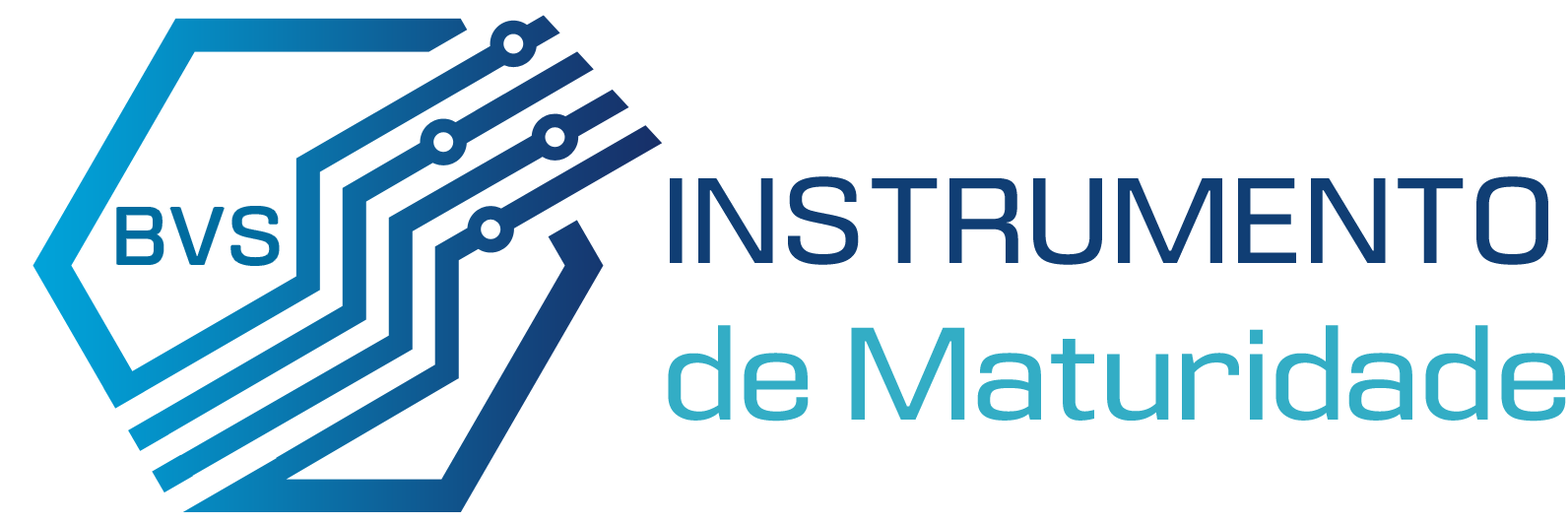
<style>
.page{position:relative;width:1568px;height:524px;background:#ffffff}
.page>*{position:absolute;margin:0}
.t1{font:130.9px "Eurocine-Regular";color:#33adc5;scale:0.9 1}
.t2{font:121px "Eurocine-Regular";color:#103e74;scale:0.9 1}
.t3{font:80.3px "Eurocine-Regular";color:#006c9f;scale:0.9 1}
</style>
<div class="page">
<p class="t1" style="left:668px;top:176px;width:898px;height:246px"><span class="t2">INSTRUMENTO<br></span>de Maturidade</p>
<p class="t3" style="left:117px;top:207px;width:162px;height:58px">BVS</p>
</div>
